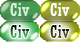
<style>
.page{position:relative;width:80px;height:42px}
.page>*{position:absolute;margin:0}
.t1{font:18px "Rockwell-Condensed";letter-spacing:0.025em;color:#ddece1}
.t2{font:18px "Rockwell-Condensed";letter-spacing:0.025em;color:#ffffff}
.t3{font:18px "Rockwell-Condensed";letter-spacing:0.025em}
</style>
<div class="page">
<p class="t1" style="left:10px;top:3px;width:20px;height:13px">Civ</p>
<p class="t2" style="left:50px;top:3px;width:20px;height:13px">Civ</p>
<p class="t3" style="left:10px;top:25px;width:20px;height:13px">Civ</p>
<p class="t3" style="left:50px;top:25px;width:20px;height:13px">Civ</p>
</div>
